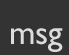
<style>
.page{position:relative;width:69px;height:55px;background:#333333}
.page>*{position:absolute;margin:0}
.t1{font:34.4px "GillSans";color:#dddddd}
</style>
<div class="page">
<p class="t1" style="left:11px;top:28px;width:52px;height:24px">msg</p>
</div>
